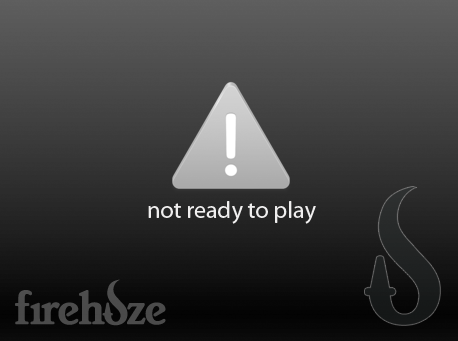
<style>
.page{position:relative;width:458px;height:341px}
.page>*{position:absolute;margin:0}
.t1{font:24px "MyriadPro-Regular";color:#f0efef}
</style>
<div class="page">
<p class="t1" style="left:148px;top:201px;width:168px;height:23px">not ready to play</p>
</div>
